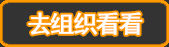
<style>
.page{position:relative;width:169px;height:47px;background:#333333}
.page>*{position:absolute;margin:0}
.t1{font:24px "SimHei";letter-spacing:-0.08em;color:#ffffff;font-weight:bold}
</style>
<div class="page">
<p class="t1" style="left:28px;top:12px;width:115px;height:23px">去组织看看</p>
</div>
